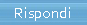
<style>
.page{position:relative;width:87px;height:25px}
.page>*{position:absolute;margin:0}
.t1{font:16px "Corbel";color:#ffffff}
</style>
<div class="page">
<p class="t1" style="left:15px;top:7px;width:55px;height:14px">Rispondi</p>
</div>
